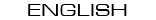
<style>
.page{position:relative;width:156px;height:20px;background:#ffffff}
.page>*{position:absolute;margin:0}
.t1{font:18px "MicrogrammaD-MediExte";letter-spacing:0.075em;color:#000000}
</style>
<div class="page">
<p class="t1" style="left:28px;top:4px;width:99px;height:12px">ENGLISH</p>
</div>
